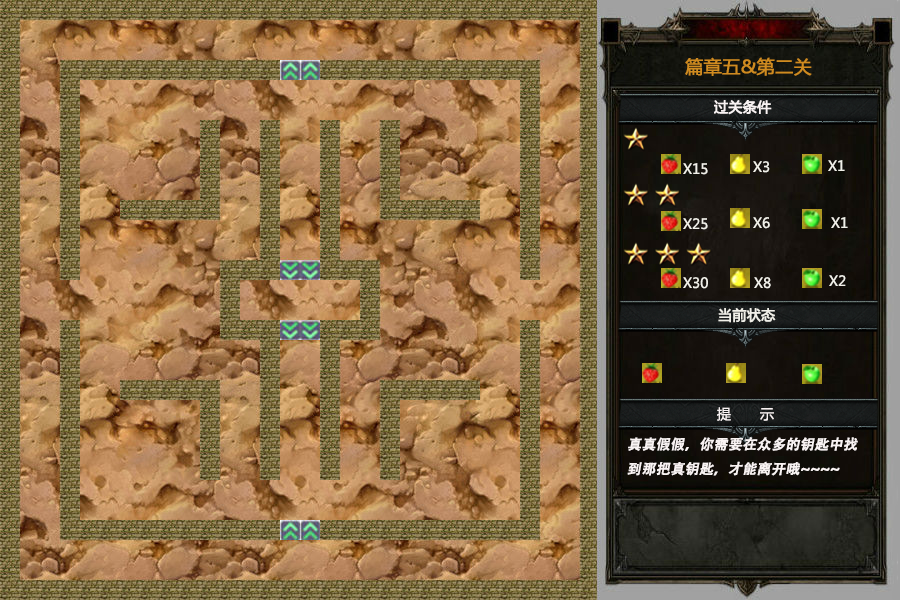
<style>
.page{position:relative;width:900px;height:600px}
.page>*{position:absolute;margin:0}
.t1{font:18px "MicrosoftYaHei";color:#cf8b20;font-weight:bold}
.t2{font:14px "MicrosoftYaHei";color:#f9f3f3;font-weight:bold}
.t3{font:14px "MicrosoftYaHei";color:#f1f0e9}
.t4{font:14px "MicrosoftYaHei";color:#f1f0e9;font-weight:bold}
.t5{font:14px "MicrosoftYaHei";color:#f9f3f3}
.t6{font:14px "AdobeHeitiStd-Regular";color:#f9f3f3;font-weight:bold;font-style:italic}
</style>
<div class="page">
<p class="t1" style="left:685px;top:57px;width:127px;height:19px">篇章五&amp;第二关</p>
<p class="t2" style="left:714px;top:100px;width:58px;height:15px">过关条件</p>
<p class="t3" style="left:753px;top:161px;width:17px;height:12px">X3</p>
<p class="t3" style="left:828px;top:160px;width:17px;height:11px">X1</p>
<p class="t3" style="left:683px;top:163px;width:25px;height:12px">X15</p>
<p class="t3" style="left:683px;top:218px;width:25px;height:12px">X25</p>
<p class="t3" style="left:753px;top:217px;width:17px;height:12px">X6</p>
<p class="t3" style="left:831px;top:217px;width:17px;height:11px">X1</p>
<p class="t3" style="left:683px;top:277px;width:25px;height:12px">X30</p>
<p class="t3" style="left:754px;top:277px;width:17px;height:12px">X8</p>
<p class="t3" style="left:829px;top:275px;width:17px;height:11px">X2</p>
<p class="t4" style="left:718px;top:308px;width:58px;height:15px">当前状态</p>
<p class="t5" style="left:717px;top:407px;width:57px;height:14px">提       示</p>
<p class="t6" style="left:627px;top:437px;width:231px;height:39px">真真假假，你需要在众多的钥匙中找到那把真钥匙，才能离开哦~~~~</p>
</div>
